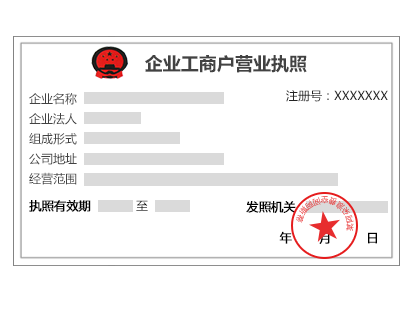
<style>
.page{position:relative;width:406px;height:320px;background:#ffffff}
.page>*{position:absolute;margin:0}
.t1{font:18px "MicrosoftYaHei-Bold";color:#424242}
.t2{font:12px/20px "MicrosoftYaHei";color:#424242}
.t3{font:12px "MicrosoftYaHei";color:#232323}
.t4{font:12px "MicrosoftYaHei";color:#010101;font-weight:bold}
.t5{font:12px "MicrosoftYaHei";color:#010101}
.t6{font:12px "MicrosoftYaHei";color:#000000;font-weight:bold}
</style>
<div class="page">
<p class="t1" style="left:145px;top:55px;width:162px;height:18px">企业工商户营业执照</p>
<p class="t2" style="left:29px;top:93px;width:48px;height:92px;text-align:center">企业名称<br>企业法人<br>组成形式<br>公司地址<br>经营范围</p>
<p class="t3" style="left:286px;top:90px;width:102px;height:12px">注册号：XXXXXXX</p>
<p class="t4" style="left:29px;top:200px;width:62px;height:12px">执照有效期</p>
<p class="t5" style="left:136px;top:200px;width:12px;height:11px">至</p>
<p class="t4" style="left:246px;top:201px;width:50px;height:12px">发照机关</p>
<p class="t6" style="left:279px;top:231px;width:98px;height:13px">年       月         日</p>
</div>
